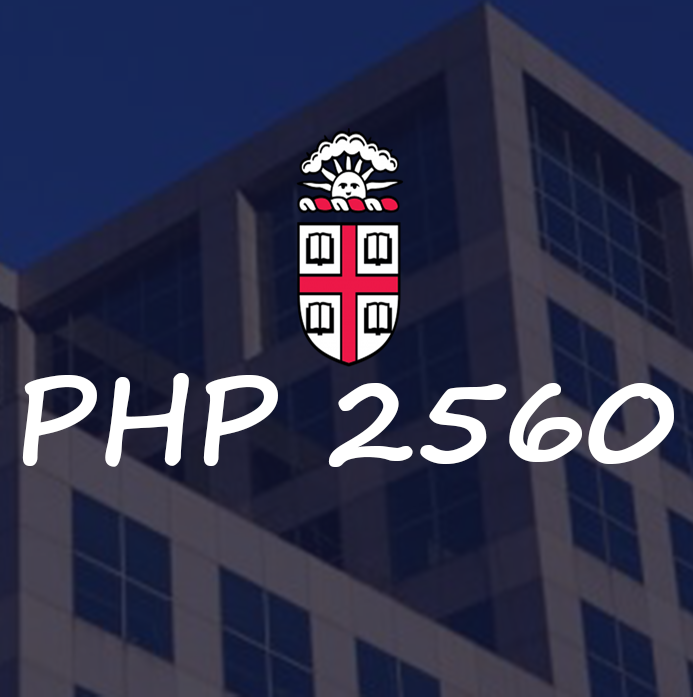
<style>
.page{position:relative;width:693px;height:697px}
.page>*{position:absolute;margin:0}
.t1{font:120px "SegoePrint-Bold";color:#ffffff}
</style>
<div class="page">
<p class="t1" style="left:22px;top:373px;width:652px;height:94px">PHP 2560</p>
</div>
